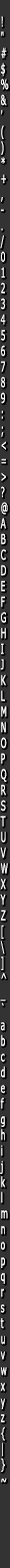
<style>
.page{position:relative;width:10px;height:1568px;background:#333333}
.page>*{position:absolute;margin:0}
.t1{font:13.7px/15.7px "Verdana";color:#ffffff;scale:0.53 1}
</style>
<div class="page">
<p class="t1" style="left:0px;top:16px;width:9px;height:1467px">!<br>"<br>#<br>$<br>%<br>&amp;<br>'<br>(<br>)<br>*<br>+<br>,<br>-<br>.<br>/<br>0<br>1<br>2<br>3<br>4<br>5<br>6<br>7<br>8<br>9<br>:<br>;<br>&lt;<br>=<br>&gt;<br>?<br>@<br>A<br>B<br>C<br>D<br>E<br>F<br>G<br>H<br>I<br>J<br>K<br>L<br>M<br>N<br>O<br>P<br>Q<br>R<br>S<br>T<br>U<br>V<br>W<br>X<br>Y<br>Z<br>[<br>\<br>]<br>^<br>_<br>`<br>a<br>b<br>c<br>d<br>e<br>f<br>g<br>h<br>i<br>j<br>k<br>l<br>m<br>n<br>o<br>p<br>q<br>r<br>s<br>t<br>u<br>v<br>w<br>x<br>y<br>z<br>{<br>|<br>}<br>~</p>
</div>
